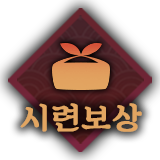
<style>
.page{position:relative;width:160px;height:160px;background:#ffffff}
.page>*{position:absolute;margin:0}
.t1{font:31.5px "SDKukdetopokki-aLt";letter-spacing:0.02em;color:#e2a561;font-weight:bold}
</style>
<div class="page">
<p class="t1" style="left:20px;top:103px;width:122px;height:29px">시련보상</p>
</div>
